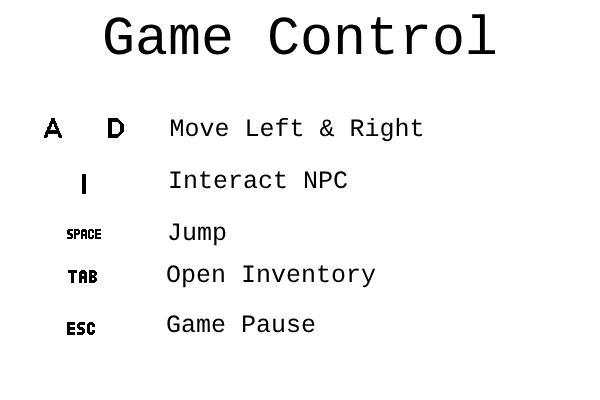
<style>
.page{position:relative;width:600px;height:400px;background:#ffffff}
.page>*{position:absolute;margin:0}
.t1{font:55px "LiberationMono";color:#000000}
.t2{font:25px "LiberationMono";color:#000000}
.t3{font:25px "LiberationMono";color:#ffffff}
</style>
<div class="page">
<p class="t1" style="left:105px;top:14px;width:390px;height:41px">Game Control</p>
<p class="t2" style="left:171px;top:117px;width:251px;height:25px">Move Left &amp; Right</p>
<p class="t2" style="left:170px;top:171px;width:177px;height:18px">Interact NPC</p>
<p class="t2" style="left:169px;top:223px;width:57px;height:23px">Jump</p>
<p class="t2" style="left:167px;top:265px;width:209px;height:23px">Open Inventory</p>
<p class="t2" style="left:167px;top:315px;width:148px;height:18px"><span class="t3">G</span>ame Pause</p>
</div>
